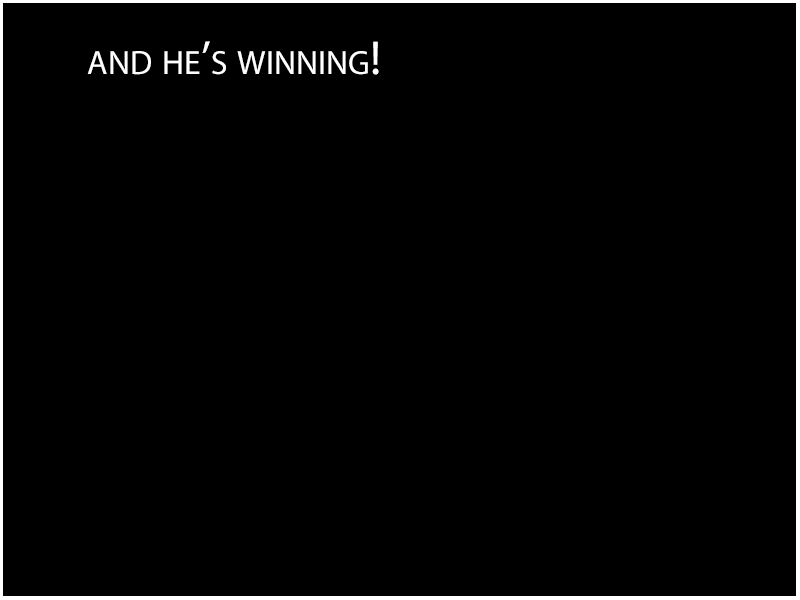
<style>
.page{position:relative;width:800px;height:600px;background:#000000}
.page>*{position:absolute;margin:0}
.t1{font:48px "MyriadPro-Regular";color:#ffffff;font-variant:small-caps}
</style>
<div class="page">
<p class="t1" style="left:87px;top:41px;width:292px;height:34px">and he’s winning!</p>
</div>
